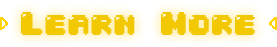
<style>
.page{position:relative;width:277px;height:47px;background:#f1c801}
.page>*{position:absolute;margin:0}
.t1{font:28px "04b30";color:#f1c801}
</style>
<div class="page">
<p class="t1" style="left:21px;top:12px;width:234px;height:23px">Learn More</p>
</div>
